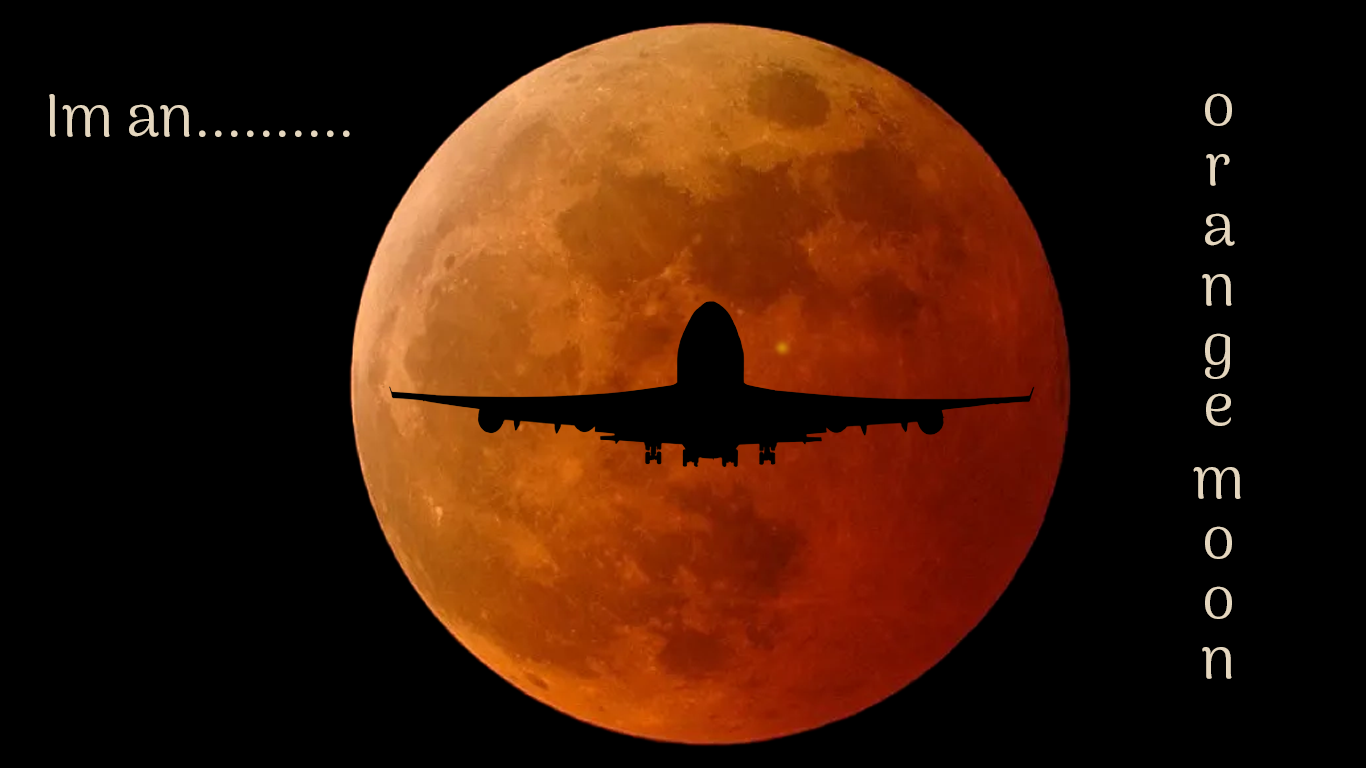
<style>
.page{position:relative;width:1366px;height:768px;background:#000000}
.page>*{position:absolute;margin:0}
.t1{font:60px "ArimaMadurai-Regular";color:#e4d6be}
</style>
<div class="page">
<p class="t1" style="left:49px;top:94px;width:301px;height:43px">Im an..........</p>
<p class="t1" style="left:1193px;top:93px;width:48px;height:586px">orange moon</p>
</div>
